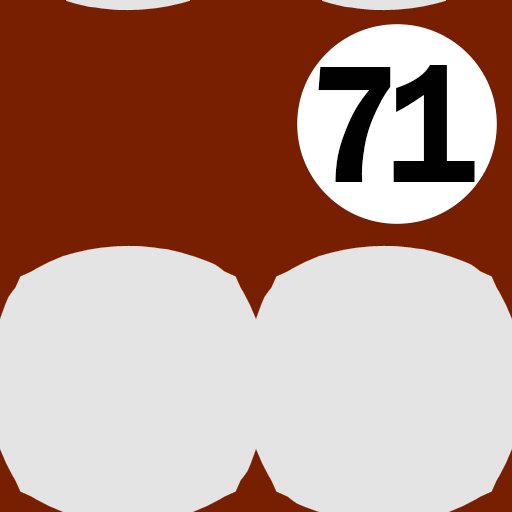
<style>
.page{position:relative;width:512px;height:512px;background:#e4e4e4}
.page>*{position:absolute;margin:0}
.t1{font:172.5px "FranklinGothic-Demi";letter-spacing:-0.05em;color:#010101;scale:0.87 1}
</style>
<div class="page">
<p class="t1" style="left:318px;top:65px;width:157px;height:117px">71</p>
</div>
